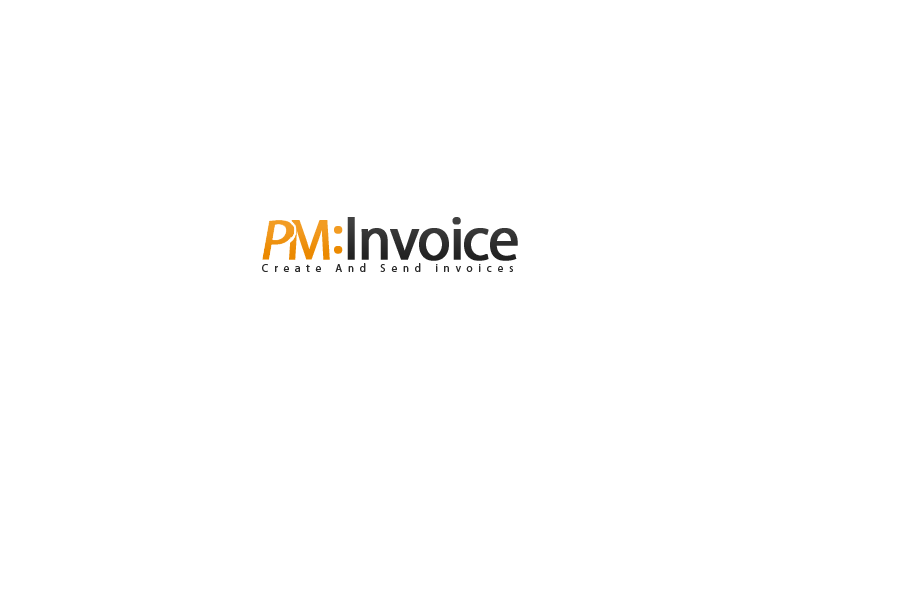
<style>
.page{position:relative;width:900px;height:600px;background:#ffffff}
.page>*{position:absolute;margin:0}
.t1{font:63px "MyriadPro-Regular";letter-spacing:-0.04em;color:#2b2b2b;font-weight:bold;scale:0.95 1}
.t2{font:57px "MyriadPro-Regular";font-weight:bold}
.t3{font:11.5px "MyriadPro-Regular";letter-spacing:0.535em;color:#2b2b2b;scale:0.95 1}
</style>
<div class="page">
<p class="t1" style="left:347px;top:217px;width:171px;height:44px">Invoice</p>
<p class="t2" style="left:334px;top:226px;width:9px;height:28px">:</p>
<p class="t3" style="left:262px;top:263px;width:251px;height:9px">Create And Send invoices</p>
</div>
